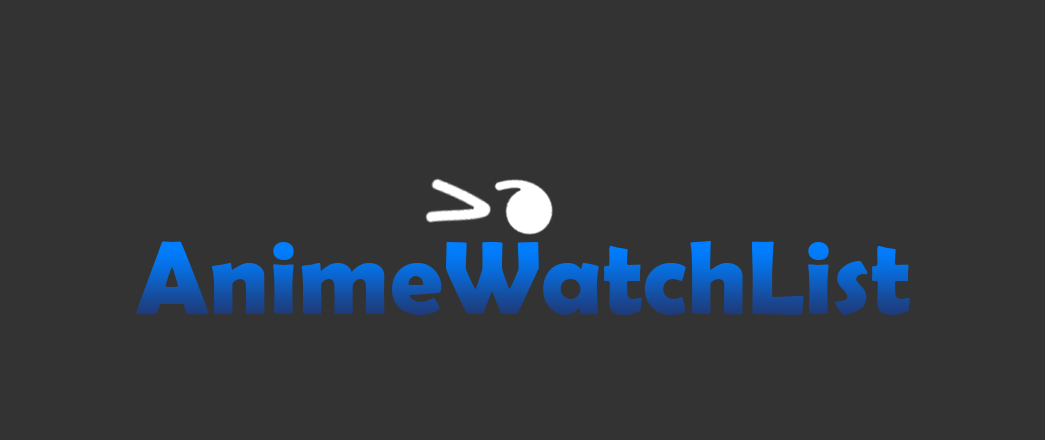
<style>
.page{position:relative;width:1045px;height:440px;background:#333333}
.page>*{position:absolute;margin:0}
.t1{font:105.3px "BerlinSansFBDemi-Bold"}
</style>
<div class="page">
<p class="t1" style="left:136px;top:241px;width:774px;height:74px">AnimeWatchList</p>
</div>
